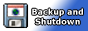
<style>
.page{position:relative;width:88px;height:31px;background:#ffffff}
.page>*{position:absolute;margin:0}
.t1{font:8px "Verdana-Bold";color:#fefefe}
</style>
<div class="page">
<p class="t1" style="left:32px;top:8px;width:51px;height:17px;text-align:center">Backup and<br>Shutdown</p>
</div>
